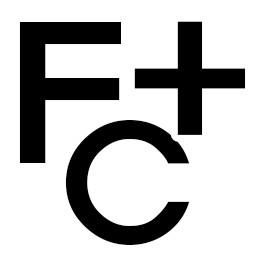
<style>
.page{position:relative;width:256px;height:256px;background:#ffffff}
.page>*{position:absolute;margin:0}
.t1{font:180.6px "ExpoM-HM";color:#000000}
.t2{font:222.2px "ExpoM-HM";color:#000000}
.t3{font:152.8px "ExpoM-HM";color:#000000}
</style>
<div class="page">
<p class="t1" style="left:19px;top:22px;width:102px;height:141px">F</p>
<p class="t2" style="left:134px;top:21px;width:112px;height:114px">+</p>
<p class="t3" style="left:65px;top:120px;width:125px;height:125px">C</p>
</div>
